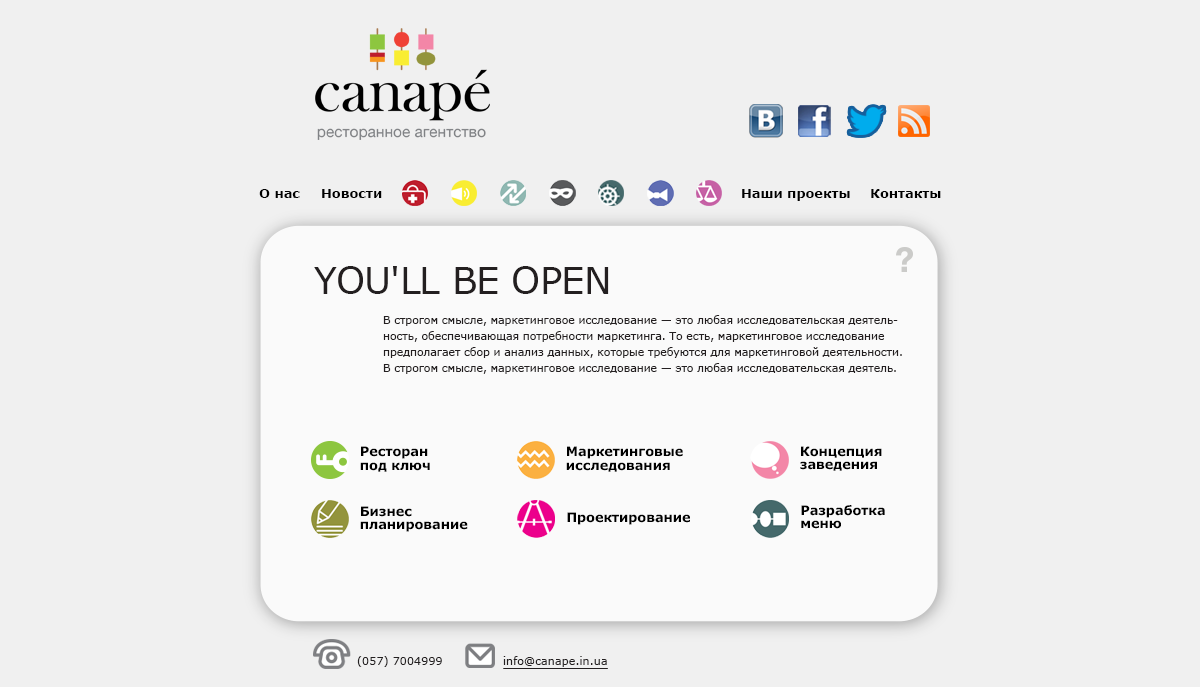
<style>
.page{position:relative;width:1200px;height:687px;background:#f0f0f0}
.page>*{position:absolute;margin:0}
.t1{font:12.9px "Verdana-Bold";color:#000000}
.t2{font:36.9px "Verdana";letter-spacing:-0.02em;color:#231f20}
.t3{font:11.2px/16.3px "Verdana";letter-spacing:-0.02em;color:#231f20}
.t4{font:12.9px/13.1px "Verdana-Bold";color:#000000}
.t5{font:11.2px "Verdana";color:#231f20}
</style>
<div class="page">
<p class="t1" style="left:259px;top:189px;width:41px;height:9px">О нас</p>
<p class="t1" style="left:322px;top:189px;width:60px;height:9px">Новости</p>
<p class="t1" style="left:742px;top:189px;width:108px;height:12px">Наши проекты</p>
<p class="t1" style="left:871px;top:189px;width:70px;height:9px">Контакты</p>
<p class="t2" style="left:314px;top:266px;width:295px;height:28px">YOU'LL BE OPEN</p>
<p class="t3" style="left:383px;top:315px;width:519px;height:59px">В строгом смысле, маркетинговое исследование — это любая исследовательская деятель-<br>ность, обеспечивающая потребности маркетинга. То есть, маркетинговое исследование<br>предполагает сбор и анализ данных, которые требуются для маркетинговой деятельности.<br>В строгом смысле, маркетинговое исследование — это любая исследовательская деятель.</p>
<p class="t4" style="left:360px;top:446px;width:70px;height:26px">Ресторан<br>под ключ</p>
<p class="t4" style="left:566px;top:446px;width:117px;height:26px">Маркетинговые<br>исследования</p>
<p class="t4" style="left:800px;top:446px;width:82px;height:25px">Концепция<br>заведения</p>
<p class="t4" style="left:360px;top:506px;width:108px;height:26px">Бизнес<br>планирование</p>
<p class="t4" style="left:801px;top:505px;width:84px;height:24px">Разработка<br>меню</p>
<p class="t1" style="left:567px;top:512px;width:123px;height:13px">Проектирование</p>
<p class="t5" style="left:357px;top:656px;width:85px;height:11px">(057) 7004999</p>
<p class="t5" style="left:503px;top:656px;width:104px;height:11px">info@canape.in.ua</p>
</div>
